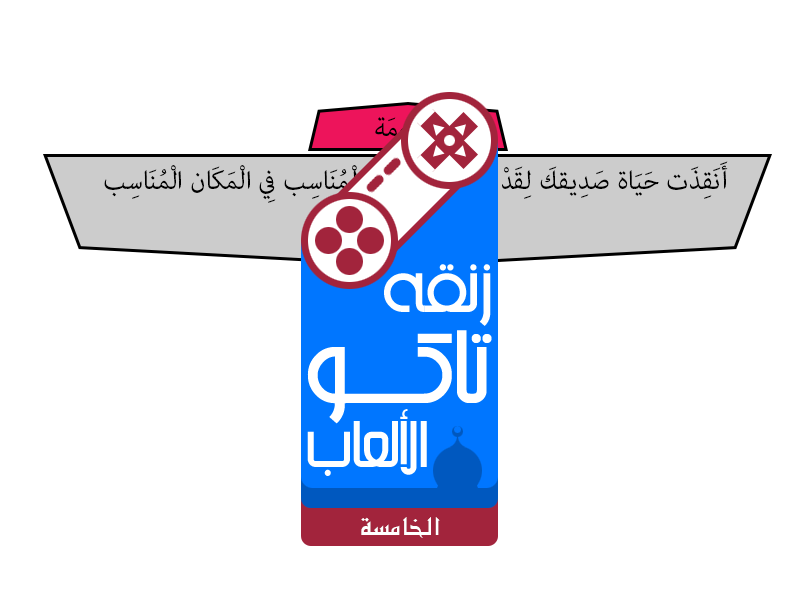
<style>
.page{position:relative;width:800px;height:600px;background:#ffffff}
.page>*{position:absolute;margin:0}
.t1{font:36px "AdobeArabic-Regular"}
.t2{font:35.9px "AdobeArabic-Regular"}
.t3{font:30px "";color:#ffffff}
</style>
<div class="page">
<p class="t1" style="left:375px;top:111px;width:66px;height:31px">مَعْلُومَة</p>
<p class="t2" style="left:104px;top:161px;width:624px;height:81px;text-align:center">أَنَقِذَت حَيَاة صَدِيقكَ لِقَدْ كُنَّت الشَّخْص الْمُنَاسِب فِي الْمَكَان الْمُنَاسِب وَالْوقْت الْمُنَاسِب</p>
<p class="t3" style="left:361px;top:517px;width:79px;height:21px">الخامسة</p>
</div>
